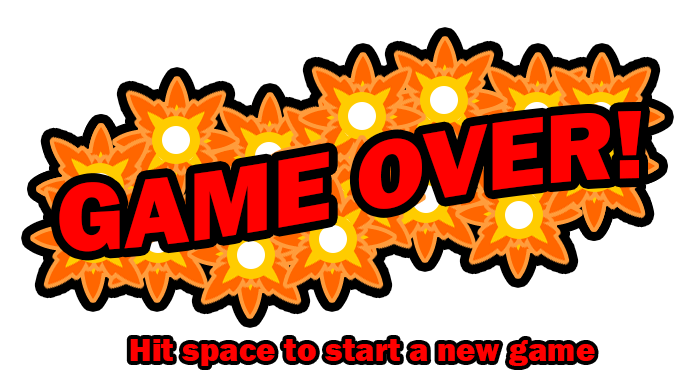
<style>
.page{position:relative;width:700px;height:384px;background:#ffffff}
.page>*{position:absolute;margin:0}
.t1{font:100px "FranklinGothic-Heavy";color:#ff0000}
.t2{font:33.3px "FranklinGothic-Heavy";color:#ff0000}
</style>
<div class="page">
<p class="t1" style="left:59px;top:111px;width:582px;height:141px">GAME OVER!</p>
<p class="t2" style="left:130px;top:339px;width:465px;height:27px">Hit space to start a new game</p>
</div>
